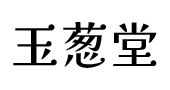
<style>
.page{position:relative;width:170px;height:90px;background:#ffffff}
.page>*{position:absolute;margin:0}
.t1{font:50px "KaiseiHarunoUmi-Medium";color:#000000}
</style>
<div class="page">
<p class="t1" style="left:13px;top:22px;width:144px;height:46px">玉葱堂</p>
</div>
